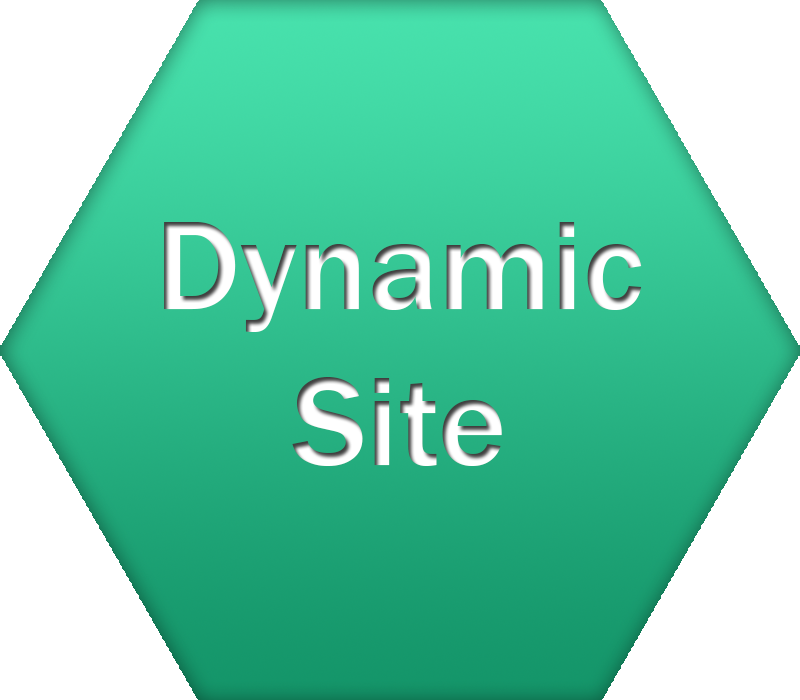
<style>
.page{position:relative;width:800px;height:700px;background:#ffffff}
.page>*{position:absolute;margin:0}
.t1{font:130px "FranklinGothic-Medium";color:#ffffff}
</style>
<div class="page">
<p class="t1" style="left:164px;top:222px;width:478px;height:244px;text-align:center">Dynamic<br>Site</p>
</div>
